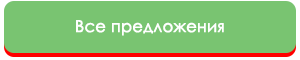
<style>
.page{position:relative;width:300px;height:60px;background:#79c471}
.page>*{position:absolute;margin:0}
.t1{font:16.3px "CenturyGothic";color:#ffffff;font-weight:bold}
</style>
<div class="page">
<p class="t1" style="left:76px;top:20px;width:148px;height:16px">Все предложения</p>
</div>
